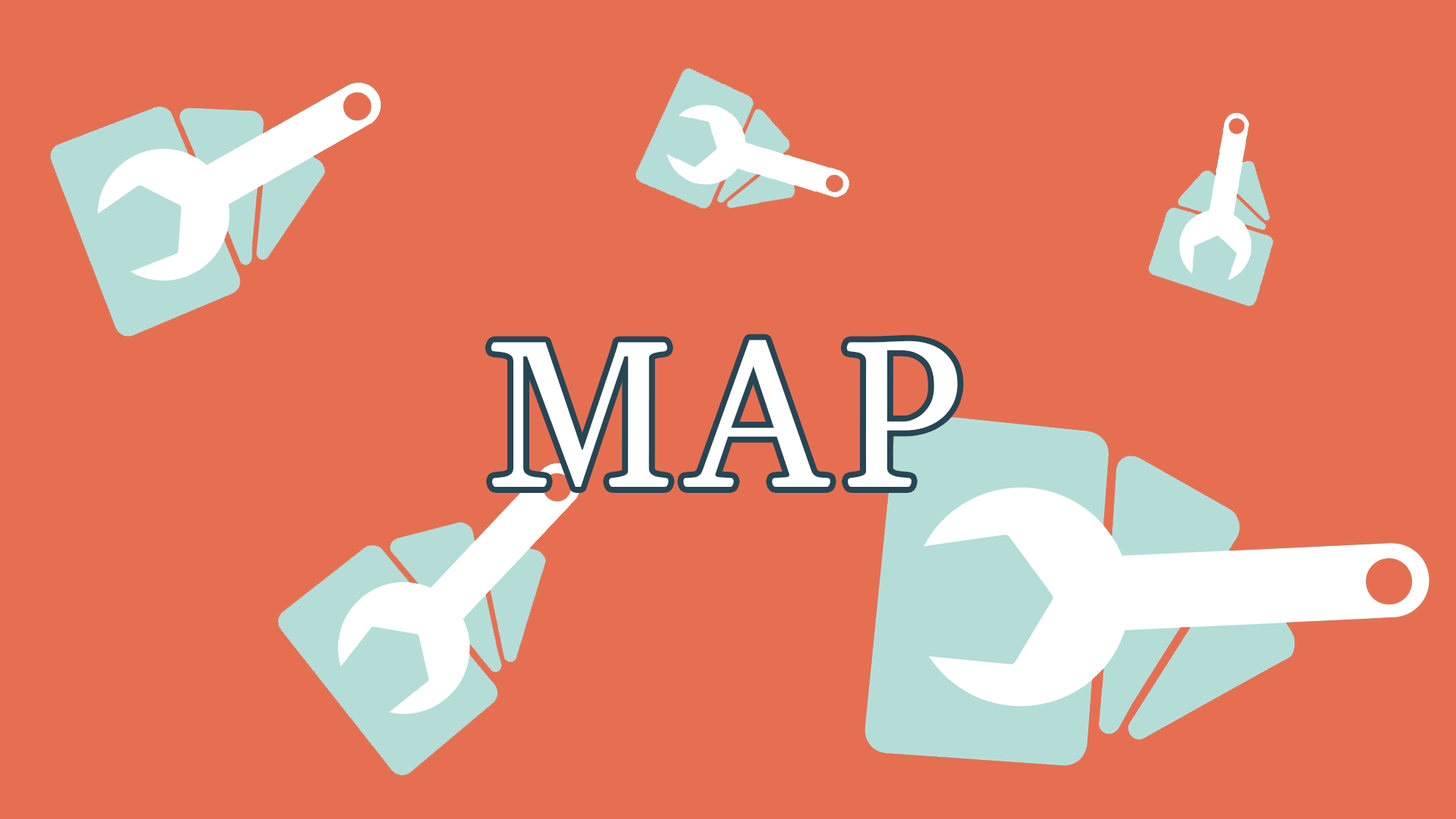
<style>
.page{position:relative;width:1456px;height:819px;background:#e76f51}
.page>*{position:absolute;margin:0}
.t1{font:208.5px "Gelasio-Regular";letter-spacing:0.05em;color:#ffffff}
</style>
<div class="page">
<p class="t1" style="left:491px;top:340px;width:467px;height:147px">MAP</p>
</div>
